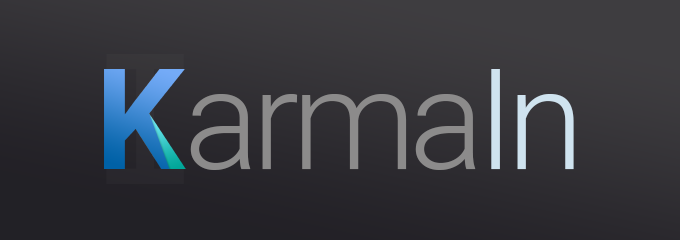
<style>
.page{position:relative;width:680px;height:240px}
.page>*{position:absolute;margin:0}
.t1{font:140px "Roboto-Light";letter-spacing:-0.05em}
.t2{font:140px "Roboto-Bold"}
</style>
<div class="page">
<p class="t1" style="left:103px;top:69px;width:471px;height:101px"><span class="t2">K</span>armaIn</p>
</div>
